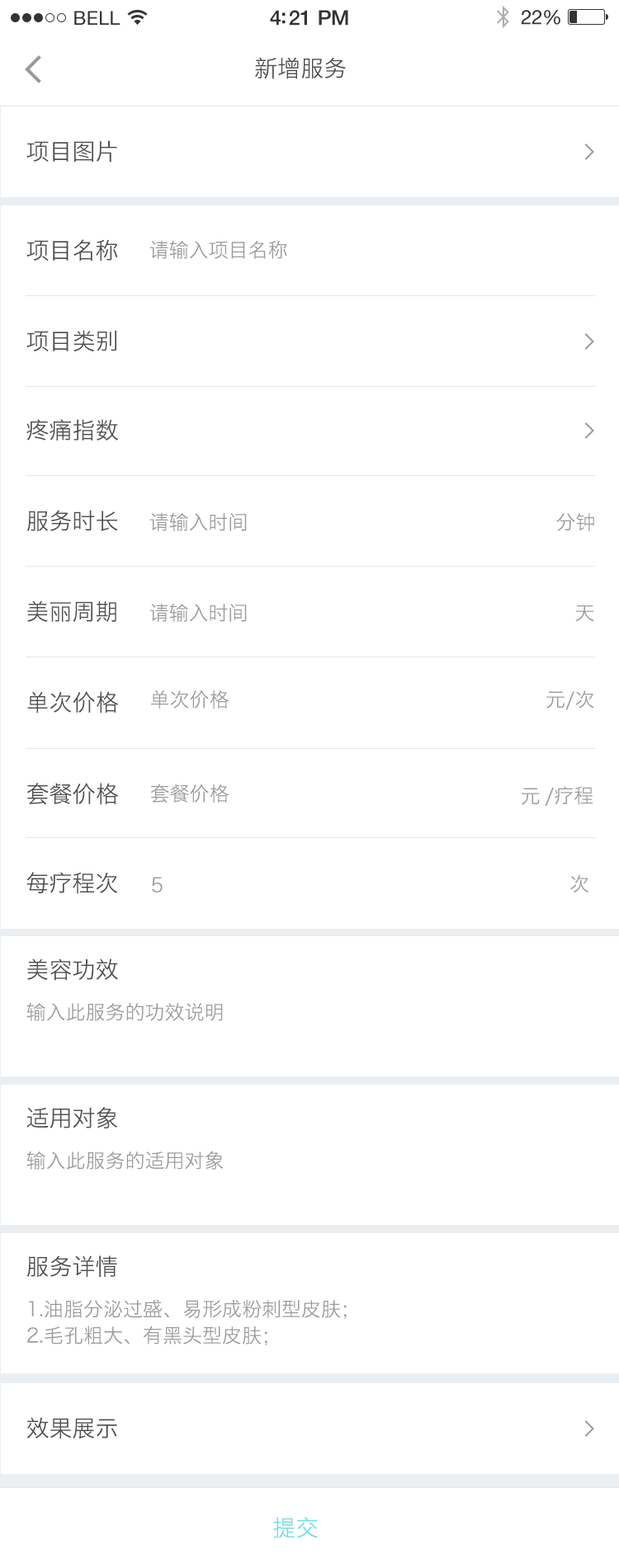
<style>
.page{position:relative;width:619px;height:1568px;background:#ffffff}
.page>*{position:absolute;margin:0}
.t1{font:23.1px "HiraginoSansGB-W3";color:#4d4d4d}
.t2{font:23.1px "HiraginoSansGB-W3";color:#4c4c4c}
.t3{font:19.8px "HiraginoSansGB-W3";color:#999999}
.t4{font:19.8px/26.4px "HiraginoSansGB-W3";color:#999999}
.t5{font:23.1px "HiraginoSansGB-W3";color:#73dce6}
</style>
<div class="page">
<p class="t1" style="left:255px;top:57px;width:91px;height:22px">新增服务</p>
<p class="t1" style="left:26px;top:140px;width:91px;height:22px">项目图片</p>
<p class="t2" style="left:26px;top:239px;width:92px;height:22px">项目名称</p>
<p class="t3" style="left:149px;top:240px;width:138px;height:19px">请输入项目名称</p>
<p class="t1" style="left:26px;top:330px;width:91px;height:22px">项目类别</p>
<p class="t1" style="left:26px;top:419px;width:92px;height:22px">疼痛指数</p>
<p class="t1" style="left:26px;top:510px;width:92px;height:21px">服务时长</p>
<p class="t3" style="left:149px;top:512px;width:98px;height:19px">请输入时间</p>
<p class="t3" style="left:556px;top:513px;width:38px;height:18px">分钟</p>
<p class="t1" style="left:27px;top:600px;width:89px;height:22px">美丽周期</p>
<p class="t3" style="left:149px;top:603px;width:98px;height:19px">请输入时间</p>
<p class="t3" style="left:575px;top:605px;width:19px;height:17px">天</p>
<p class="t3" style="left:151px;top:690px;width:78px;height:19px">单次价格</p>
<p class="t1" style="left:27px;top:691px;width:92px;height:22px">单次价格</p>
<p class="t3" style="left:546px;top:690px;width:48px;height:20px">元/次</p>
<p class="t2" style="left:26px;top:783px;width:93px;height:22px">套餐价格</p>
<p class="t3" style="left:150px;top:784px;width:79px;height:19px">套餐价格</p>
<p class="t3" style="left:521px;top:788px;width:18px;height:17px">元</p>
<p class="t3" style="left:544px;top:786px;width:49px;height:20px">/疗程</p>
<p class="t2" style="left:26px;top:872px;width:92px;height:22px">每疗程次</p>
<p class="t3" style="left:152px;top:877px;width:10px;height:15px">5</p>
<p class="t3" style="left:570px;top:874px;width:18px;height:18px">次</p>
<p class="t2" style="left:27px;top:958px;width:91px;height:23px">美容功效</p>
<p class="t3" style="left:26px;top:1002px;width:197px;height:19px">输入此服务的功效说明</p>
<p class="t2" style="left:26px;top:1107px;width:92px;height:21px">适用对象</p>
<p class="t3" style="left:26px;top:1151px;width:198px;height:19px">输入此服务的适用对象</p>
<p class="t2" style="left:26px;top:1255px;width:91px;height:22px">服务详情</p>
<p class="t4" style="left:27px;top:1300px;width:319px;height:45px;text-align:justify">1.油脂分泌过盛、易形成粉刺型皮肤；<br>2.毛孔粗大、有黑头型皮肤；</p>
<p class="t1" style="left:26px;top:1417px;width:91px;height:22px">效果展示</p>
<p class="t5" style="left:273px;top:1517px;width:45px;height:21px">提交</p>
</div>
